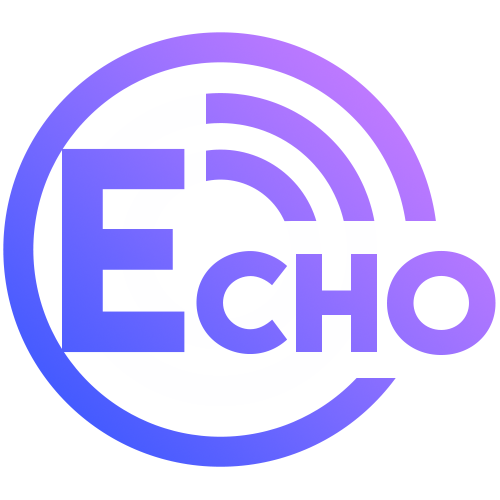
<style>
.page{position:relative;width:500px;height:500px;background:#ffffff}
.page>*{position:absolute;margin:0}
.t1{font:125px "LEMONMILK-Bold";letter-spacing:-0.02em}
.t2{font:257.9px "LEMONMILK-Medium";letter-spacing:-0.02em}
</style>
<div class="page">
<p class="t1" style="left:62px;top:148px;width:434px;height:207px"><span class="t2">E</span>cho</p>
</div>
